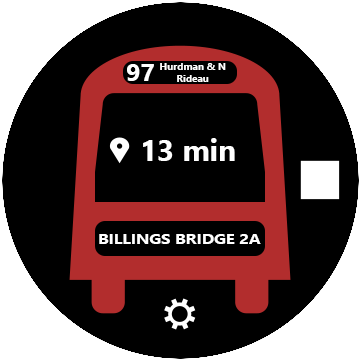
<style>
.page{position:relative;width:360px;height:360px;background:#000000}
.page>*{position:absolute;margin:0}
.t1{font:24px "SegoeUI-Bold";color:#ffffff;scale:1.06 1}
.t2{font:10px "SegoeUI-Bold";color:#ffffff}
.t3{font:29.6px "SegoeUI-Bold";color:#ffffff}
.t4{font:13.8px "SegoeUI-Bold";color:#ffffff;scale:1.21 1}
</style>
<div class="page">
<p class="t1" style="left:127px;top:64px;width:27px;height:17px">97</p>
<p class="t2" style="left:160px;top:63px;width:66px;height:19px;text-align:center">Hurdman &amp; N<br>Rideau</p>
<p class="t3" style="left:143px;top:138px;width:92px;height:23px">13 min</p>
<p class="t4" style="left:99px;top:234px;width:162px;height:10px">BILLINGS BRIDGE 2A</p>
</div>
